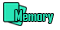
<style>
.page{position:relative;width:60px;height:30px;background:#ffffff}
.page>*{position:absolute;margin:0}
.t1{font:14px "AgencyFB-Bold";color:#29e4b6}
</style>
<div class="page">
<p class="t1" style="left:15px;top:10px;width:38px;height:13px">Memory</p>
</div>
